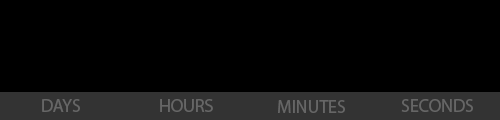
<style>
.page{position:relative;width:500px;height:120px;background:#000000}
.page>*{position:absolute;margin:0}
.t1{font:18px "MyriadPro-Regular";color:#666666}
</style>
<div class="page">
<p class="t1" style="left:42px;top:99px;width:38px;height:13px">DAYS</p>
<p class="t1" style="left:160px;top:99px;width:53px;height:13px">HOURS</p>
<p class="t1" style="left:278px;top:100px;width:67px;height:13px">MINUTES</p>
<p class="t1" style="left:401px;top:99px;width:72px;height:13px">SECONDS</p>
</div>
